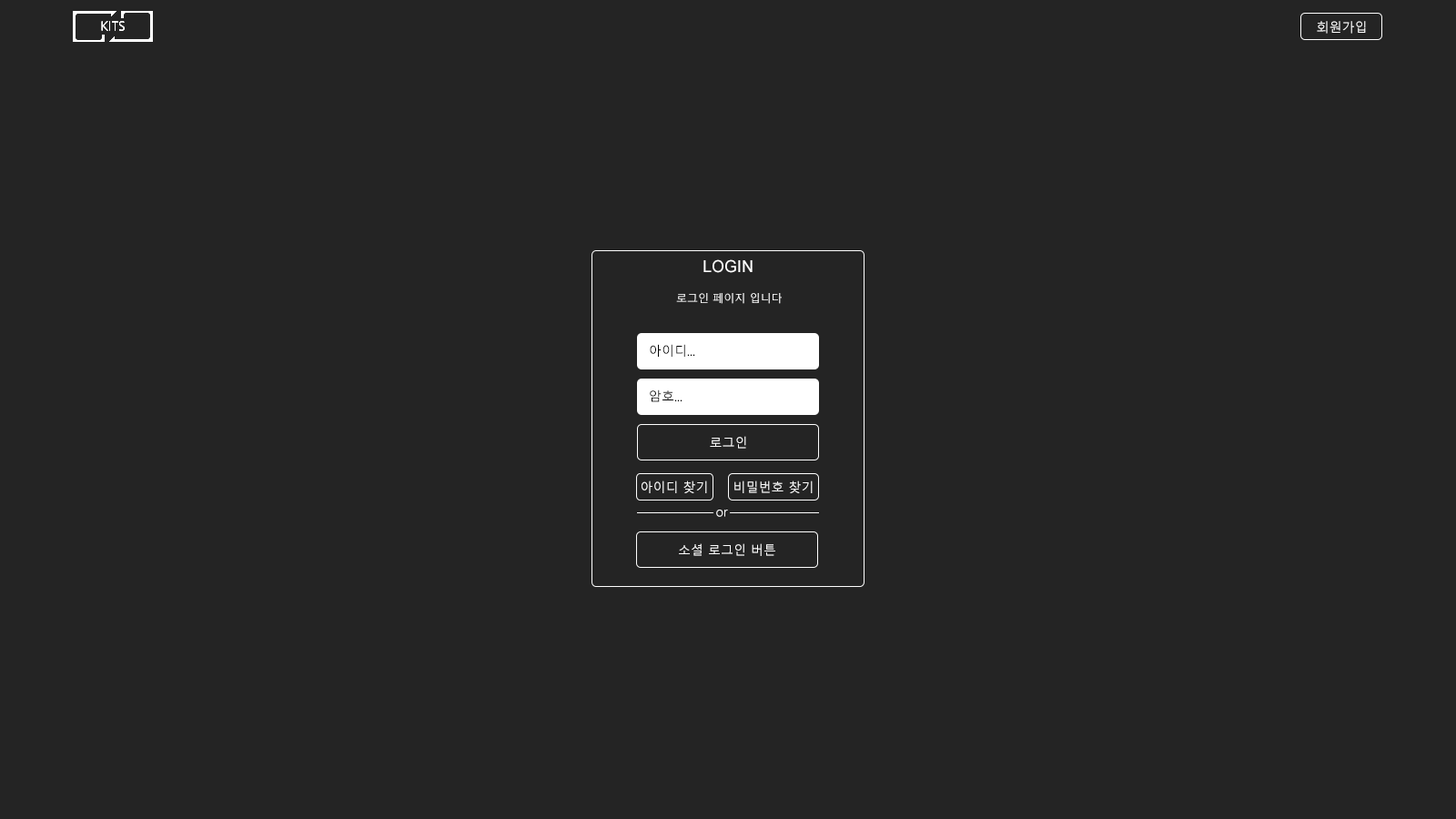
<style>
.page{position:relative;width:1456px;height:819px;background:#242424}
.page>*{position:absolute;margin:0}
.t1{font:12.7px "MalgunGothic";color:#ffffff}
.t2{font:16.4px "ArialMT";color:#ffffff}
.t3{font:10.9px "MalgunGothic";color:#ffffff}
.t4{font:12.7px "MalgunGothic";color:#000000}
</style>
<div class="page">
<p class="t1" style="left:1317px;top:21px;width:49px;height:13px">회원가입</p>
<p class="t2" style="left:703px;top:259px;width:50px;height:14px">LOGIN</p>
<p class="t3" style="left:676px;top:293px;width:106px;height:11px">로그인 페이지 입니다</p>
<p class="t4" style="left:650px;top:344px;width:45px;height:13px">아이디...</p>
<p class="t4" style="left:650px;top:389px;width:32px;height:13px">암호...</p>
<p class="t1" style="left:710px;top:436px;width:36px;height:13px">로그인</p>
<p class="t1" style="left:642px;top:480px;width:65px;height:13px">아이디 찾기</p>
<p class="t1" style="left:734px;top:480px;width:79px;height:13px">비밀번호 찾기</p>
<p class="t1" style="left:716px;top:510px;width:12px;height:7px">or</p>
<p class="t1" style="left:679px;top:543px;width:96px;height:13px">소셜 로그인 버튼</p>
</div>
